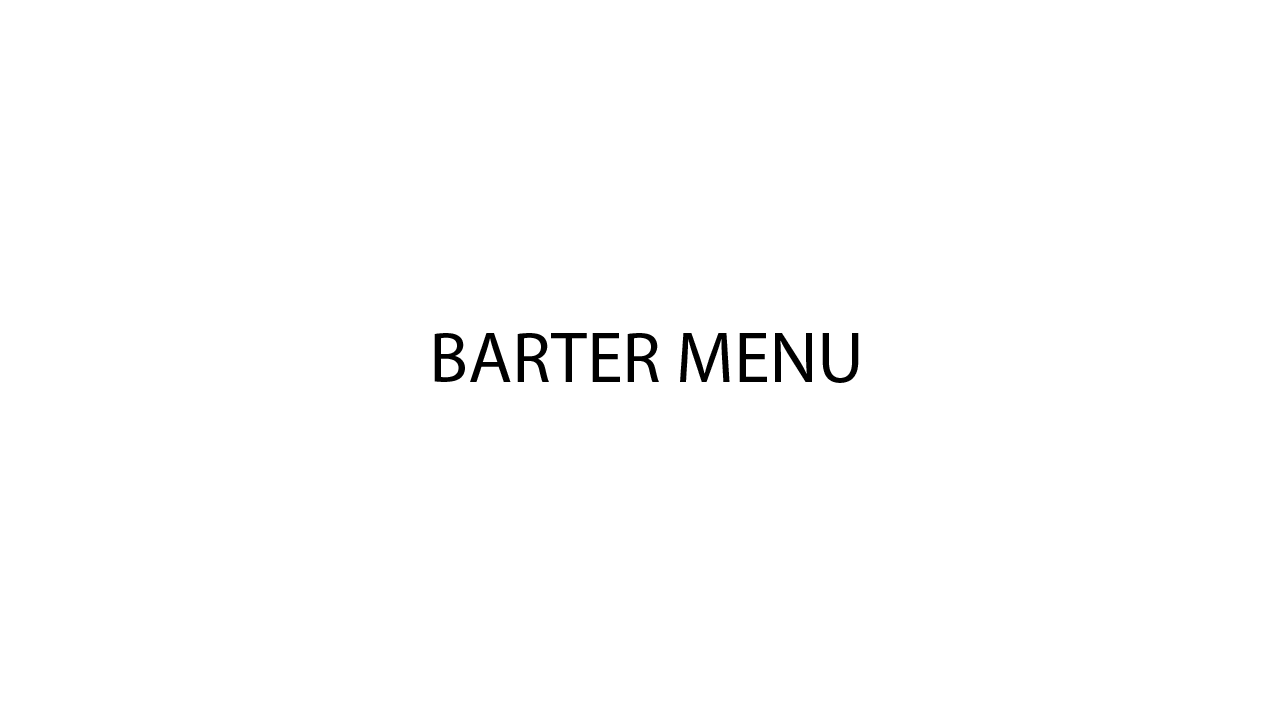
<style>
.page{position:relative;width:1280px;height:720px;background:#ffffff}
.page>*{position:absolute;margin:0}
.t1{font:72px "MyriadPro-Regular";color:#000000}
</style>
<div class="page">
<p class="t1" style="left:434px;top:333px;width:425px;height:50px">BARTER MENU</p>
</div>
